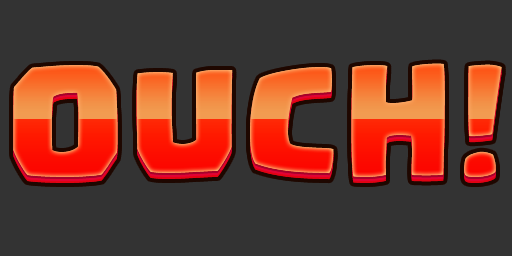
<style>
.page{position:relative;width:512px;height:256px;background:#333333}
.page>*{position:absolute;margin:0}
.t1{font:112px "Supercell-Magic";letter-spacing:0.06em}
</style>
<div class="page">
<p class="t1" style="left:13px;top:63px;width:489px;height:114px">OUCH!</p>
</div>
